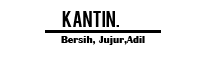
<style>
.page{position:relative;width:200px;height:70px;background:#ffffff}
.page>*{position:absolute;margin:0}
.t1{font:18px "Bebas";color:#000000}
.t2{font:18px "Bebas";color:#ffffff}
.t3{font:11px "BritannicBold";color:#000000}
</style>
<div class="page">
<p class="t1" style="left:62px;top:11px;width:77px;height:16px">kantin.<span class="t2">ku</span></p>
<p class="t3" style="left:61px;top:36px;width:84px;height:9px">Bersih, Jujur,Adil</p>
</div>
